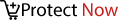
<style>
.page{position:relative;width:120px;height:20px;background:#ffffff}
.page>*{position:absolute;margin:0}
.t1{font:15px "MyriadPro-Regular";color:#000000}
.t2{font:19px "MyriadPro-Regular";color:#000000}
.t3{font:19px "MyriadPro-Regular";color:#c61c1c}
.t4{font:15px "MyriadPro-Regular";color:#bf3e3e}
.t5{font:20px "MyriadPro-Regular";color:#000000}
</style>
<div class="page">
<p class="t1" style="left:22px;top:3px;width:96px;height:14px"><span class="t2">Protect </span><span class="t3">Now </span>Naldsnaskl<span class="t4">NOWN</span><span class="t5">Now</span></p>
</div>
